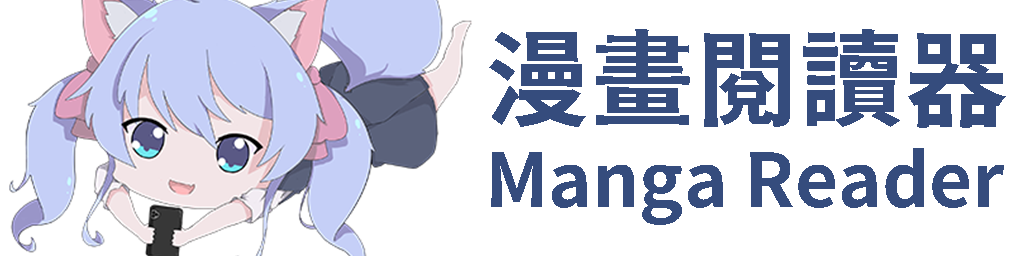
<style>
.page{position:relative;width:1024px;height:256px;background:#ffffff}
.page>*{position:absolute;margin:0}
.t1{font:73.9px/116.3px "GenSekiGothicTW-B";color:#354c7d}
.t2{font:104.5px/116.3px "GenSekiGothicTW-B";color:#354c7d}
</style>
<div class="page">
<p class="t1" style="left:489px;top:29px;width:517px;height:196px"><span class="t2">漫畫閱讀器<br></span>Manga Reader</p>
</div>
